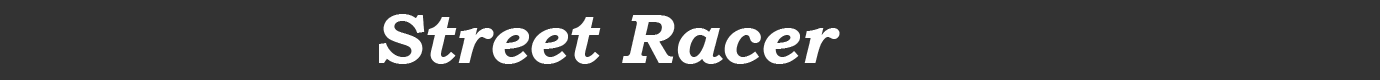
<style>
.page{position:relative;width:1380px;height:80px;background:#333333}
.page>*{position:absolute;margin:0}
.t1{font:70px "BookmanOldStyle-BoldItalic";color:#ffffff}
</style>
<div class="page">
<p class="t1" style="left:379px;top:14px;width:461px;height:50px">Street Racer</p>
</div>
